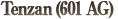
<style>
.page{position:relative;width:118px;height:19px;background:#ffffff}
.page>*{position:absolute;margin:0}
.t1{font:18px "RyuminPro-ExBold";letter-spacing:-0.08em;color:#4a3f32;font-weight:bold;scale:0.9 1}
</style>
<div class="page">
<p class="t1" style="left:0px;top:0px;width:114px;height:19px">Tenzan (601 AG)</p>
</div>
